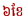
<style>
.page{position:relative;width:25px;height:16px;background:#ffffff}
.page>*{position:absolute;margin:0}
.t1{font:12px "Kh-Battambang";color:#a30000}
</style>
<div class="page">
<p class="t1" style="left:2px;top:2px;width:21px;height:15px">៦ខែ</p>
</div>
